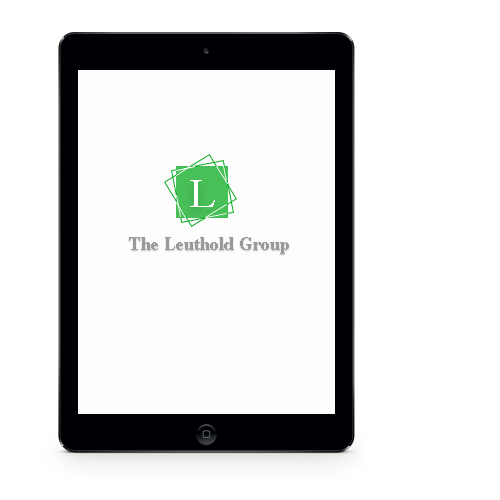
<style>
.page{position:relative;width:500px;height:500px;background:#fffffd}
.page>*{position:absolute;margin:0}
.t1{font:41.3px "Times-Roman";color:#fffffd}
.t2{font:18px "Times-Bold";color:#9a9a99}
</style>
<div class="page">
<p class="t1" style="left:190px;top:180px;width:25px;height:27px">L</p>
<p class="t2" style="left:129px;top:237px;width:160px;height:17px">The Leuthold Group</p>
</div>
